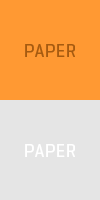
<style>
.page{position:relative;width:100px;height:200px;background:#ff9933}
.page>*{position:absolute;margin:0}
.t1{font:18px "Geogrotesque-Medium";letter-spacing:0.03em;color:#a65b10;text-transform:uppercase}
.t2{font:18px "Geogrotesque-Medium";letter-spacing:0.03em;color:#ffffff;text-transform:uppercase}
</style>
<div class="page">
<p class="t1" style="left:25px;top:44px;width:50px;height:13px">PAPER</p>
<p class="t2" style="left:25px;top:144px;width:50px;height:13px">PAPER</p>
</div>
